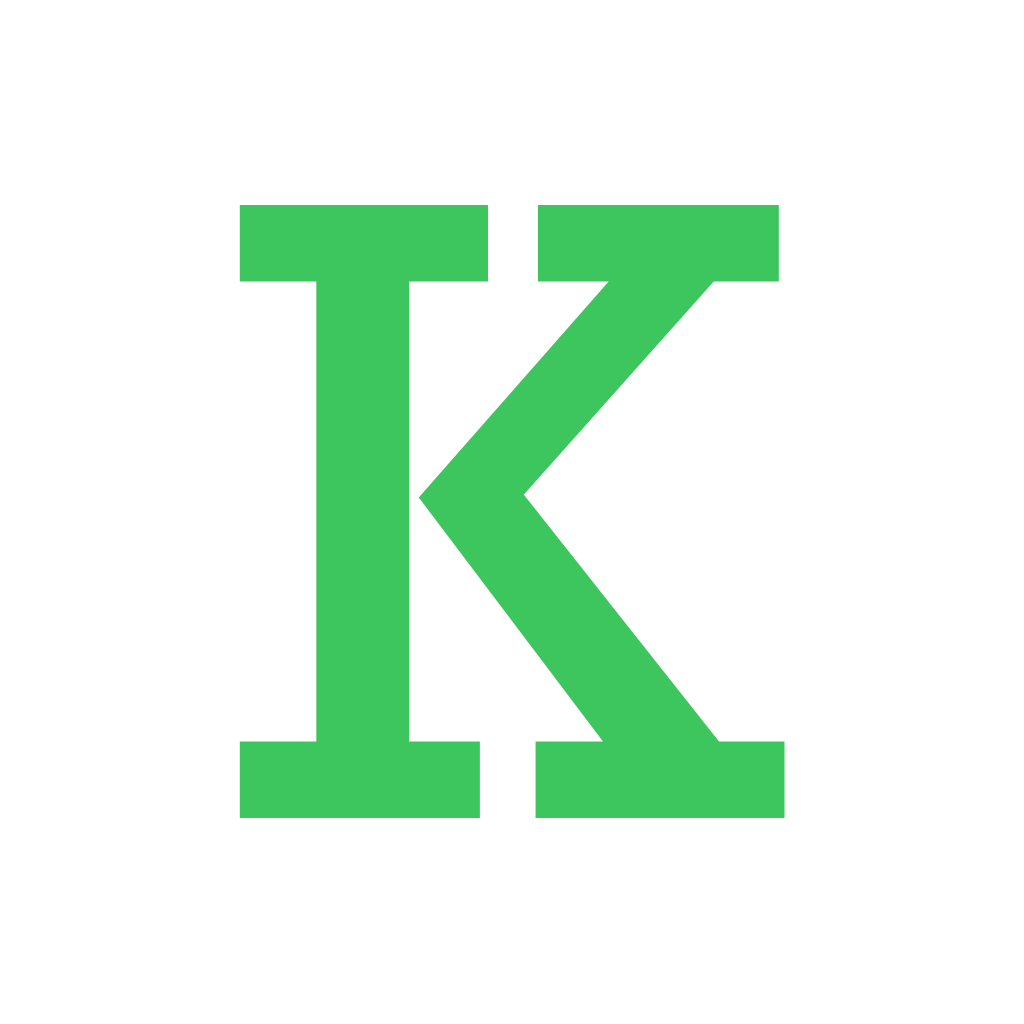
<style>
.page{position:relative;width:1024px;height:1024px;background:#ffffff}
.page>*{position:absolute;margin:0}
.t1{font:833.3px "Rockwell-Regular";color:#3dc55e}
</style>
<div class="page">
<p class="t1" style="left:239px;top:205px;width:546px;height:613px">K</p>
</div>
